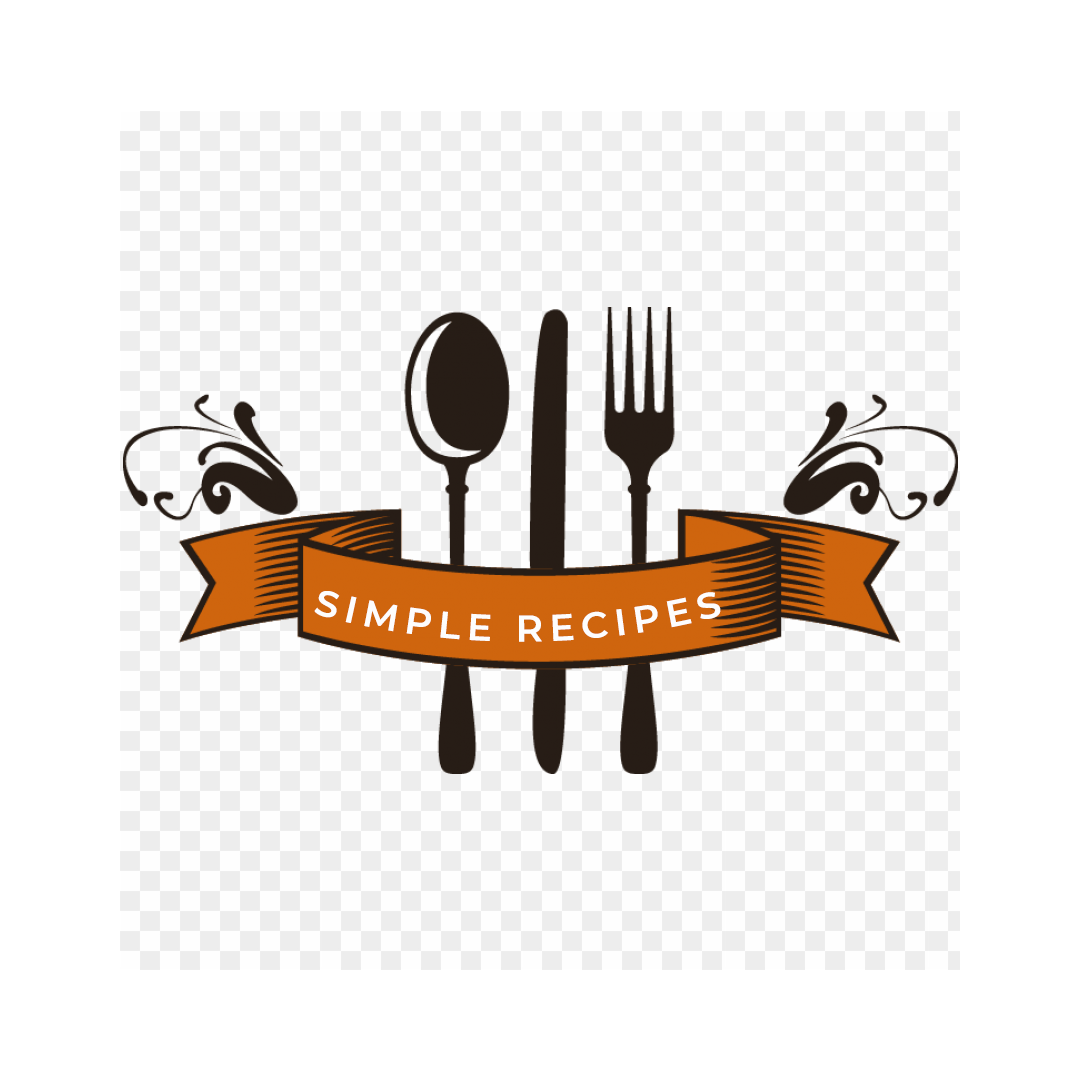
<style>
.page{position:relative;width:1080px;height:1080px;background:#ffffff}
.page>*{position:absolute;margin:0}
.t1{font:36px "Montserrat-SemiBold";letter-spacing:0.18em;color:#fdfdfd}
</style>
<div class="page">
<p class="t1" style="left:314px;top:591px;width:407px;height:51px">SIMPLE RECIPES</p>
</div>
